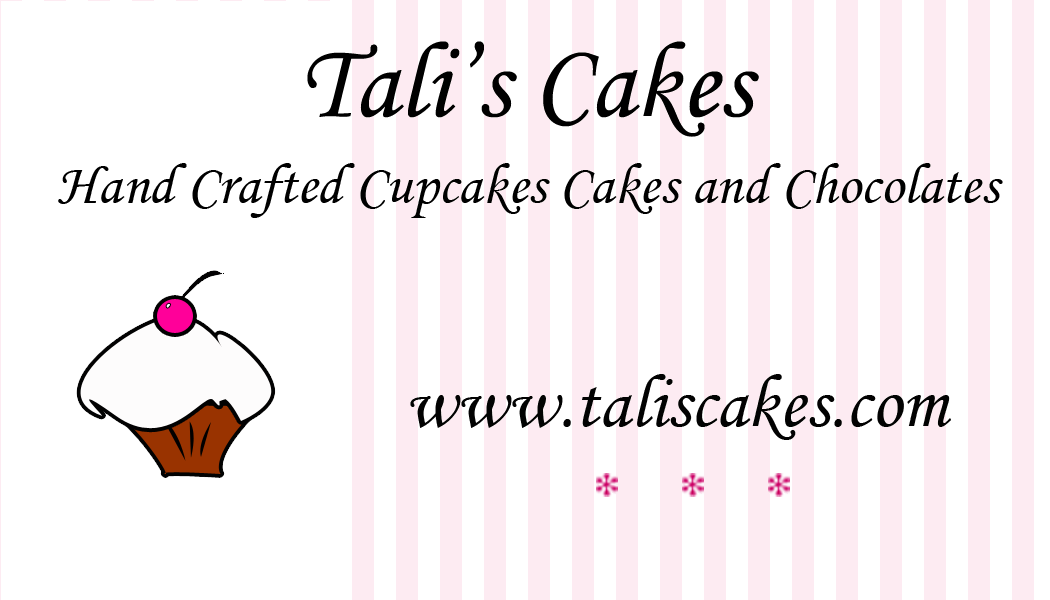
<style>
.page{position:relative;width:1050px;height:600px;background:#ffffff}
.page>*{position:absolute;margin:0}
.t1{font:108.3px "MonotypeCorsiva";color:#000000}
.t2{font:58.3px "MonotypeCorsiva";color:#000000}
.t3{font:75px "MonotypeCorsiva";color:#020202}
.t4{font:33.3px "MonotypeCorsiva";color:#000000}
</style>
<div class="page">
<p class="t1" style="left:307px;top:41px;width:452px;height:96px">Tali’s Cakes</p>
<p class="t2" style="left:58px;top:163px;width:945px;height:55px">Hand Crafted Cupcakes Cakes and Chocolates</p>
<p class="t3" style="left:410px;top:374px;width:541px;height:66px"><span class="t4"><br></span>www.taliscakes.com</p>
</div>
